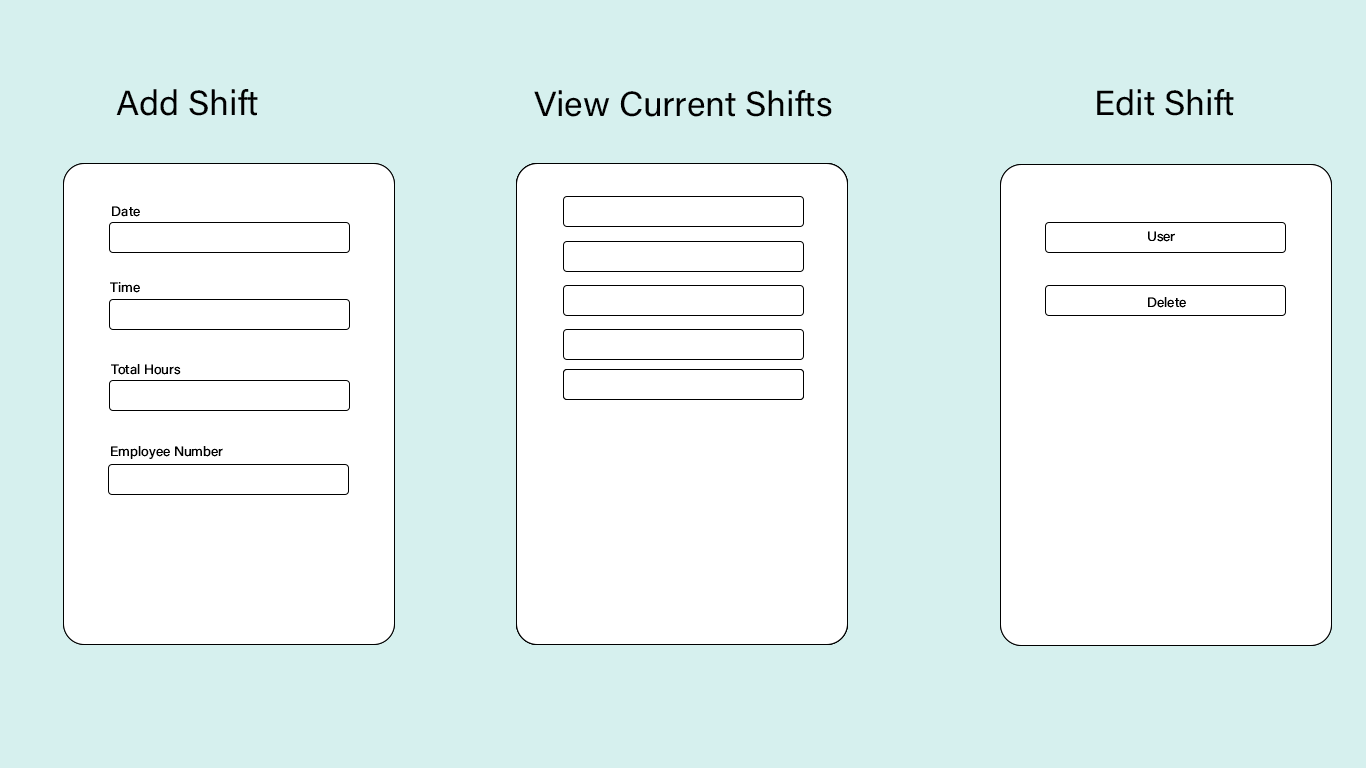
<style>
.page{position:relative;width:1366px;height:768px;background:#d6f0ee}
.page>*{position:absolute;margin:0}
.t1{font:35px "AcuminConcept-Regular";color:#000000}
.t2{font:13.8px "AcuminConcept-Regular"}
.t3{font:13.8px "AcuminConcept-Regular";color:#000000}
</style>
<div class="page">
<p class="t1" style="left:116px;top:89px;width:142px;height:27px">Add Shift</p>
<p class="t1" style="left:1097px;top:89px;width:137px;height:27px">Edit Shift</p>
<p class="t1" style="left:534px;top:90px;width:298px;height:27px">View Current Shifts</p>
<p class="t2" style="left:112px;top:206px;width:36px;height:11px">Name</p>
<p class="t3" style="left:112px;top:206px;width:28px;height:11px">Date</p>
<p class="t3" style="left:1148px;top:231px;width:27px;height:11px">User</p>
<p class="t3" style="left:1148px;top:231px;width:27px;height:11px">User</p>
<p class="t3" style="left:110px;top:282px;width:30px;height:11px">Time</p>
<p class="t3" style="left:1148px;top:297px;width:38px;height:11px">Delete</p>
<p class="t3" style="left:1148px;top:297px;width:38px;height:11px">Delete</p>
<p class="t3" style="left:111px;top:364px;width:70px;height:11px">Total Hours</p>
<p class="t3" style="left:111px;top:446px;width:112px;height:13px">Employee Number</p>
<p class="t3" style="left:111px;top:446px;width:112px;height:13px">Employee Number</p>
</div>
